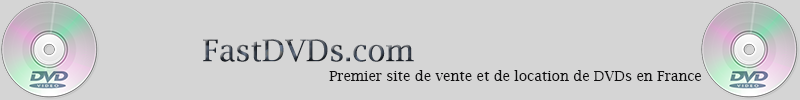
<style>
.page{position:relative;width:800px;height:100px;background:#d5d5d5}
.page>*{position:absolute;margin:0}
.t1{font:30px "LucidaBright"}
.t2{font:14px "LucidaBright";color:#0f0e0f}
</style>
<div class="page">
<p class="t1" style="left:203px;top:39px;width:211px;height:23px">FastDVDs.com</p>
<p class="t2" style="left:329px;top:70px;width:372px;height:11px">Premier site de vente et de location de DVDs en France</p>
</div>
